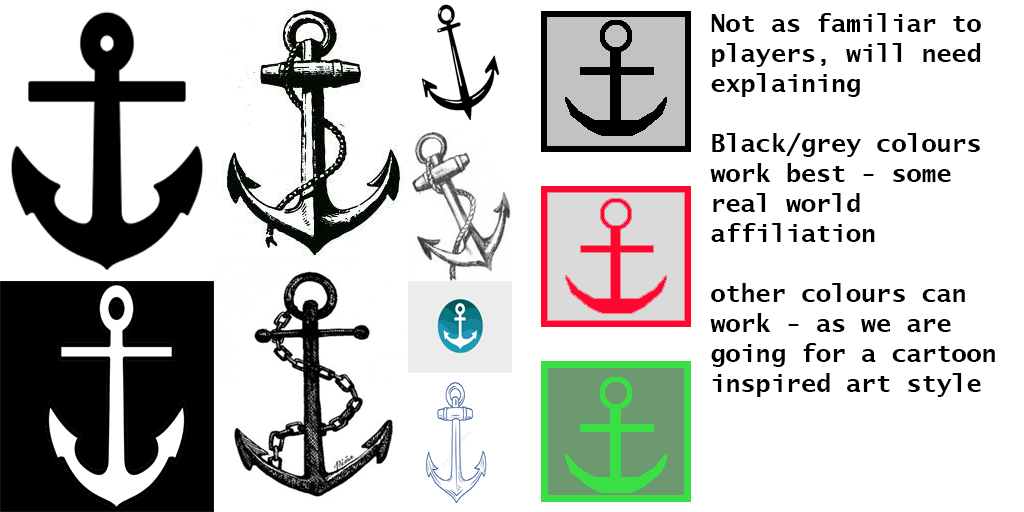
<style>
.page{position:relative;width:1024px;height:512px;background:#ffffff}
.page>*{position:absolute;margin:0}
.t1{font:25px "LucidaSans-TypewriterBold";color:#000000}
</style>
<div class="page">
<p class="t1" style="left:710px;top:13px;width:285px;height:384px">Not as familiar to<br>players, will need<br>explaining<br><br>Black/grey colours<br>work best - some <br>real world <br>affiliation<br><br>other colours can<br>work - as we are<br>going for a cartoon<br>inspired art style</p>
</div>
